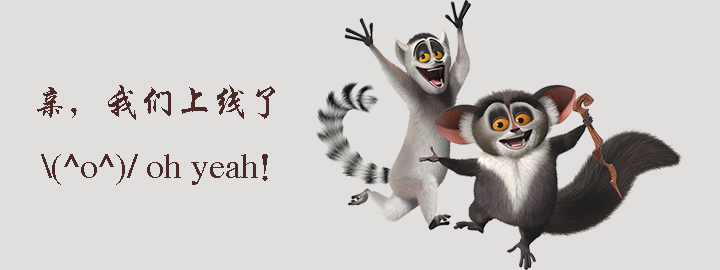
<style>
.page{position:relative;width:720px;height:270px;background:#e1dede}
.page>*{position:absolute;margin:0}
.t1{font:36px "CTXingKaiSJ";color:#4a2a2a}
</style>
<div class="page">
<p class="t1" style="left:37px;top:85px;width:238px;height:100px">亲，我们上线了<br> \(^o^)/ oh yeah！</p>
</div>
